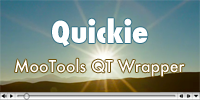
<style>
.page{position:relative;width:200px;height:100px}
.page>*{position:absolute;margin:0}
.t1{font:30px "Futura-CondensedExtraBold";color:#ffffff}
.t2{font:16px "Futura-Medium";color:#ffffff}
</style>
<div class="page">
<p class="t1" style="left:52px;top:18px;width:96px;height:29px">Quickie</p>
<p class="t2" style="left:15px;top:58px;width:170px;height:19px">MooTools QT Wrapper</p>
</div>
